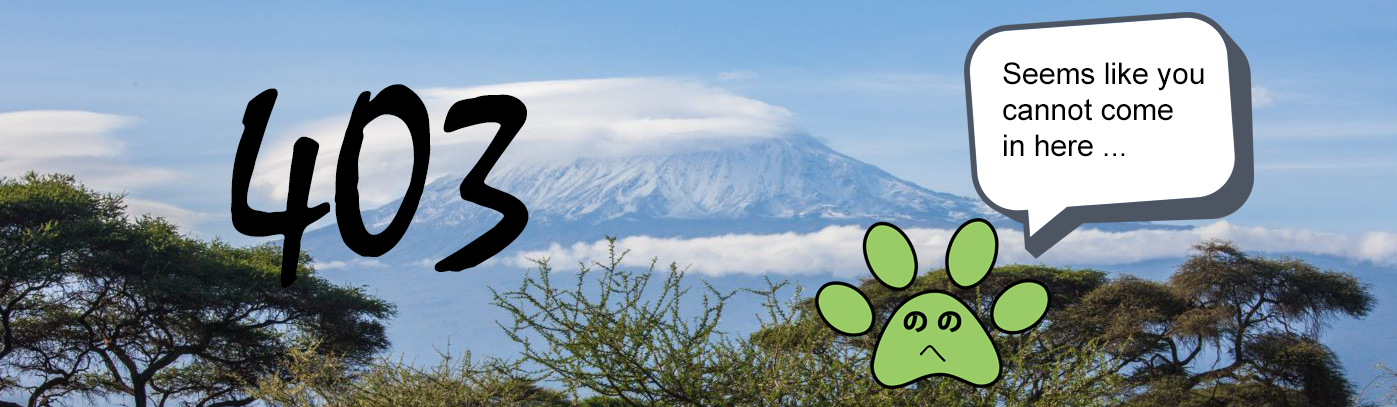
<style>
.page{position:relative;width:1397px;height:407px}
.page>*{position:absolute;margin:0}
.t1{font:30px "ArialMT";color:#000000}
.t2{font:250px "Mistral";color:#000000}
</style>
<div class="page">
<p class="t1" style="left:1003px;top:62px;width:201px;height:95px">Seems like you<br>cannot come<br>in here ...</p>
<p class="t2" style="left:231px;top:84px;width:298px;height:204px">403</p>
</div>
